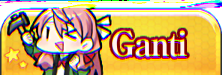
<style>
.page{position:relative;width:222px;height:75px}
.page>*{position:absolute;margin:0}
.t1{font:34px "RyuminPro-ExBold";letter-spacing:-0.08em;color:#fff5f0}
</style>
<div class="page">
<p class="t1" style="left:112px;top:29px;width:75px;height:27px">Ganti</p>
</div>
